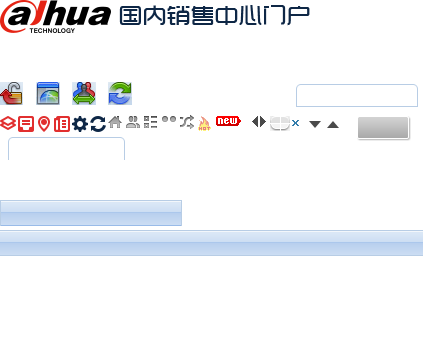
<style>
.page{position:relative;width:423px;height:349px;background:#ffffff}
.page>*{position:absolute;margin:0}
.t1{font:24px "TRENDS";color:#0e2746}
</style>
<div class="page">
<p class="t1" style="left:119px;top:5px;width:191px;height:21px">国内销售中心门户</p>
</div>
